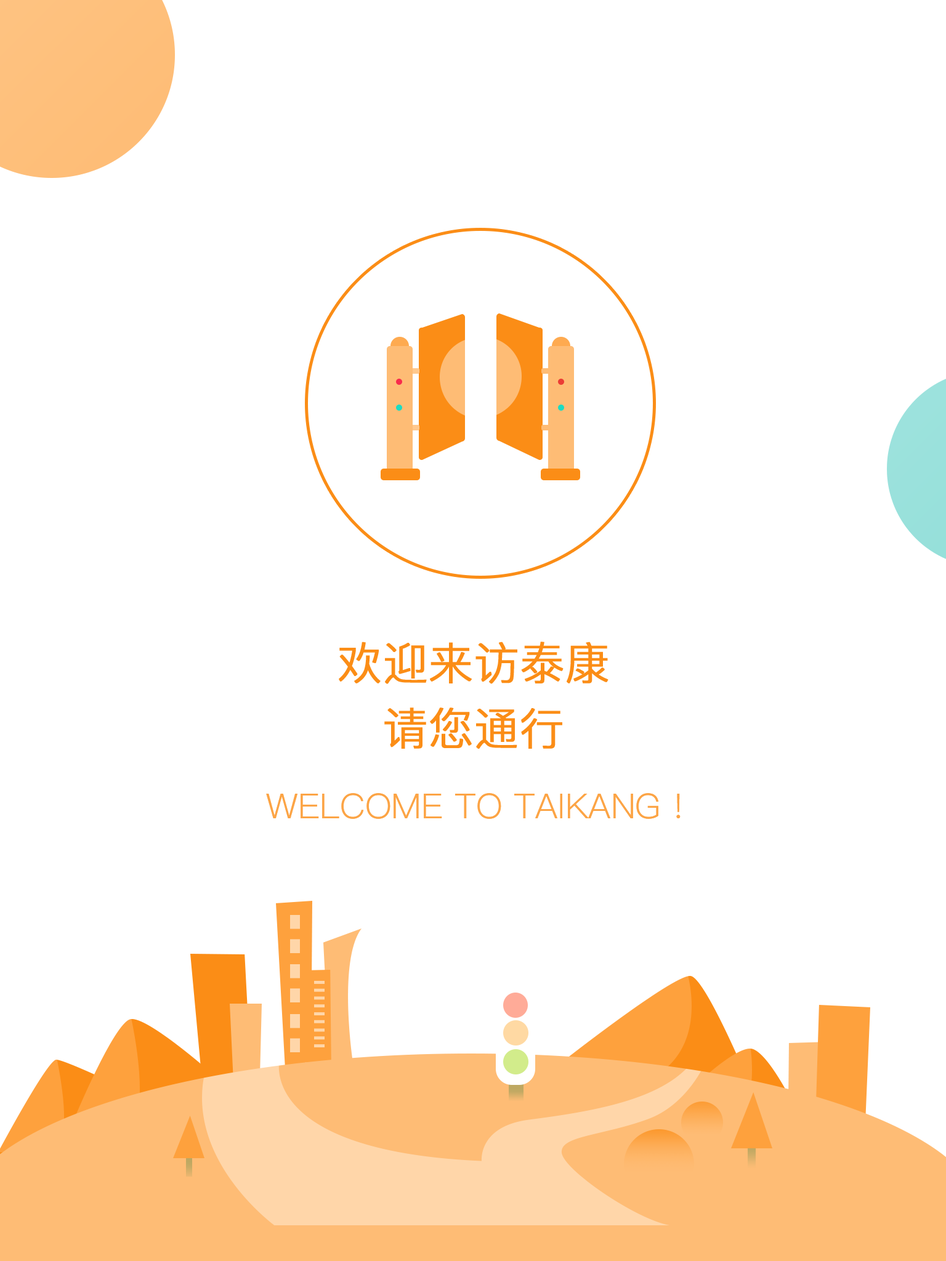
<style>
.page{position:relative;width:946px;height:1261px;background:#ffffff}
.page>*{position:absolute;margin:0}
.t1{font:44.3px "PingFang-SC-Regular";color:#fb8d16;font-weight:bold}
.t2{font:34.5px "PingFang-SC-Regular";color:#fca445;text-transform:uppercase}
</style>
<div class="page">
<p class="t1" style="left:339px;top:642px;width:269px;height:42px">欢迎来访泰康</p>
<p class="t1" style="left:384px;top:707px;width:178px;height:42px">请您通行</p>
<p class="t2" style="left:266px;top:793px;width:414px;height:26px">Welcome to Taikang !</p>
</div>
